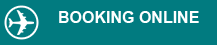
<style>
.page{position:relative;width:217px;height:45px;background:#017b80}
.page>*{position:absolute;margin:0}
.t1{font:16px "Arial-BoldMT";color:#ffffff}
</style>
<div class="page">
<p class="t1" style="left:59px;top:11px;width:140px;height:12px">BOOKING ONLINE</p>
</div>
